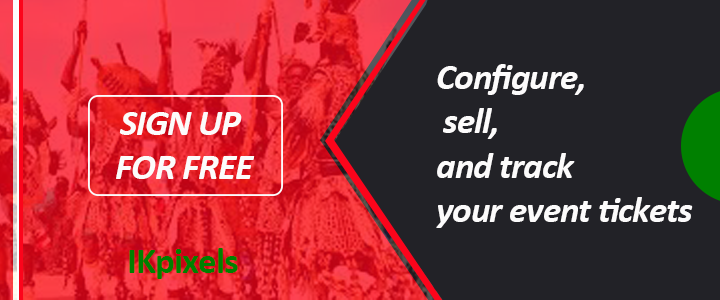
<style>
.page{position:relative;width:720px;height:300px;background:#222227}
.page>*{position:absolute;margin:0}
.t1{font:36.9px "Calibri-BoldItalic";letter-spacing:-0.025em;color:#fcfbfb}
.t2{font:36.9px "Calibri-Bold";letter-spacing:-0.025em;color:#008000}
</style>
<div class="page">
<p class="t1" style="left:436px;top:64px;width:257px;height:164px">Configure,<br> sell, <br>and track <br>your event tickets</p>
<p class="t1" style="left:116px;top:112px;width:139px;height:67px;text-align:center">SIGN UP <br>FOR FREE</p>
<p class="t2" style="left:129px;top:248px;width:109px;height:31px">IKpixels</p>
</div>
